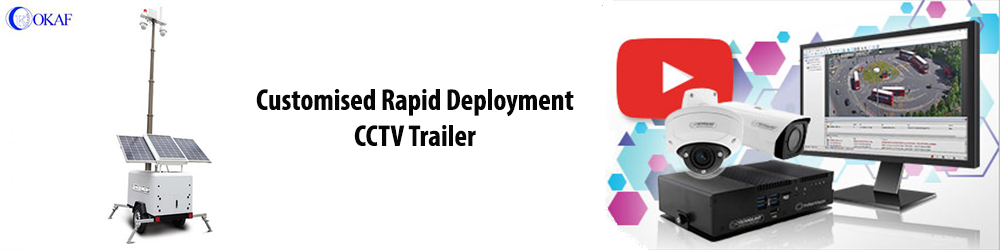
<style>
.page{position:relative;width:1000px;height:250px;background:#ffffff}
.page>*{position:absolute;margin:0}
.t1{font:30px "MyriadPro-BoldCond";color:#060606}
</style>
<div class="page">
<p class="t1" style="left:256px;top:89px;width:318px;height:57px;text-align:center">Customised Rapid Deployment CCTV Trailer</p>
</div>
